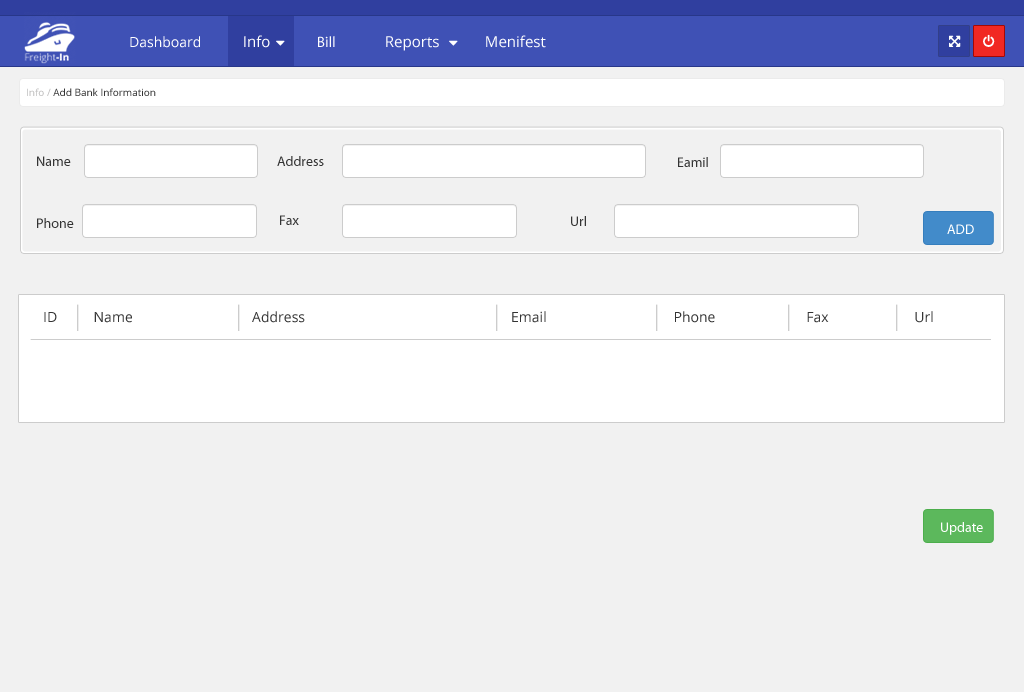
<style>
.page{position:relative;width:1024px;height:692px;background:#f1f1f1}
.page>*{position:absolute;margin:0}
.t1{font:14px "OpenSans";color:#ffffff}
.t2{font:15px "OpenSans";color:#ffffff}
.t3{font:15px "MyriadPro-Regular";color:#ffffff}
.t4{font:10px "OpenSans";color:#343434}
.t5{font:10px "OpenSans";color:#bebdbd}
.t6{font:14px "MyriadPro-Regular";color:#343434}
.t7{font:14px "MyriadPro-Regular";color:#ffffff}
.t8{font:14px "OpenSans";color:#343434}
</style>
<div class="page">
<p class="t1" style="left:130px;top:36px;width:70px;height:12px">Dashboard</p>
<p class="t2" style="left:244px;top:35px;width:26px;height:13px">Info</p>
<p class="t3" style="left:318px;top:36px;width:17px;height:11px">Bill</p>
<p class="t2" style="left:386px;top:36px;width:53px;height:15px">Reports</p>
<p class="t2" style="left:486px;top:35px;width:60px;height:13px">Menifest</p>
<p class="t4" style="left:27px;top:88px;width:129px;height:8px"><span class="t5">Info / </span>Add Bank Information</p>
<p class="t6" style="left:37px;top:156px;width:34px;height:10px">Name</p>
<p class="t6" style="left:277px;top:156px;width:47px;height:10px">Address</p>
<p class="t6" style="left:678px;top:157px;width:30px;height:10px">Eamil</p>
<p class="t6" style="left:37px;top:218px;width:37px;height:10px">Phone</p>
<p class="t6" style="left:280px;top:215px;width:19px;height:10px">Fax</p>
<p class="t6" style="left:571px;top:216px;width:15px;height:10px">Url</p>
<p class="t7" style="left:947px;top:224px;width:27px;height:10px">ADD</p>
<p class="t8" style="left:44px;top:311px;width:889px;height:12px">ID     Name           Address      Email                  Phone     Fax     Url</p>
<p class="t7" style="left:941px;top:522px;width:42px;height:13px">Update</p>
</div>
